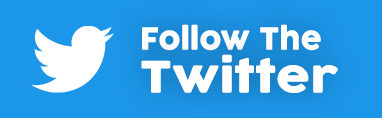
<style>
.page{position:relative;width:382px;height:118px;background:#1c96e8}
.page>*{position:absolute;margin:0}
.t1{font:30.2px "Cocogoose";color:#ffffff}
.t2{font:42.6px "Cocogoose";color:#ffffff;scale:1.15 1}
</style>
<div class="page">
<p class="t1" style="left:142px;top:24px;width:179px;height:27px">Follow The</p>
<p class="t2" style="left:141px;top:54px;width:197px;height:39px">Twitter</p>
</div>
